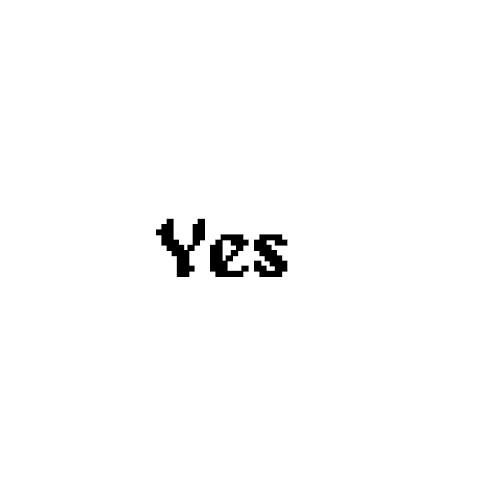
<style>
.page{position:relative;width:500px;height:500px;background:#ffffff}
.page>*{position:absolute;margin:0}
.t1{font:83.2px "Alagard";color:#000000;font-weight:bold}
</style>
<div class="page">
<p class="t1" style="left:156px;top:218px;width:132px;height:59px">Yes</p>
</div>
